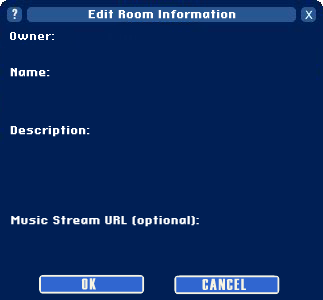
<style>
.page{position:relative;width:323px;height:300px;background:#001f55}
.page>*{position:absolute;margin:0}
.t1{font:16px "Foxley816Bold";color:#ffffff}
</style>
<div class="page">
<p class="t1" style="left:88px;top:10px;width:148px;height:9px">Edit Room Information</p>
<p class="t1" style="left:10px;top:68px;width:40px;height:9px">Name:</p>
<p class="t1" style="left:10px;top:126px;width:80px;height:11px">Description:</p>
<p class="t1" style="left:11px;top:216px;width:188px;height:11px">Music Stream URL (optional):</p>
</div>
